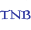
<style>
.page{position:relative;width:31px;height:30px;background:#ffffff}
.page>*{position:absolute;margin:0}
.t1{font:12.3px "Planewalker";letter-spacing:-0.07em;color:#2a329e;scale:1.16 1}
</style>
<div class="page">
<p class="t1" style="left:0px;top:9px;width:31px;height:11px">TNB</p>
</div>
